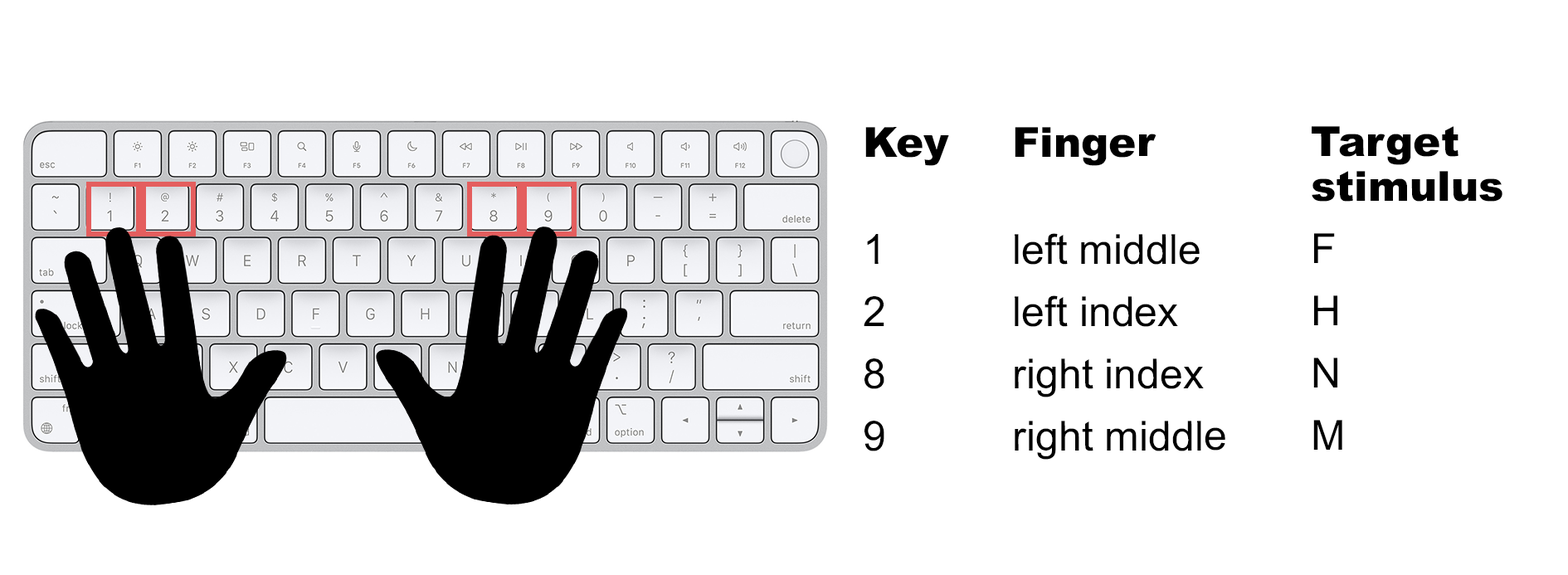
<style>
.page{position:relative;width:1568px;height:575px;background:#ffffff}
.page>*{position:absolute;margin:0}
.t1{font:41.5px/62.2px "ArialMT";color:#000000}
.t2{font:41.5px/72.6px "Arial-Black";color:#000000}
.t3{font:41.5px/44.9px "Arial-Black";color:#000000}
</style>
<div class="page">
<p class="t1" style="left:864px;top:126px;width:638px;height:334px"><span class="t2">Key   Finger      </span><span class="t3">Target<br>               stimulus<br></span>1     left middle    F<br>2     left index     H<br>8     right index    N<br>9     right middle   M</p>
</div>
